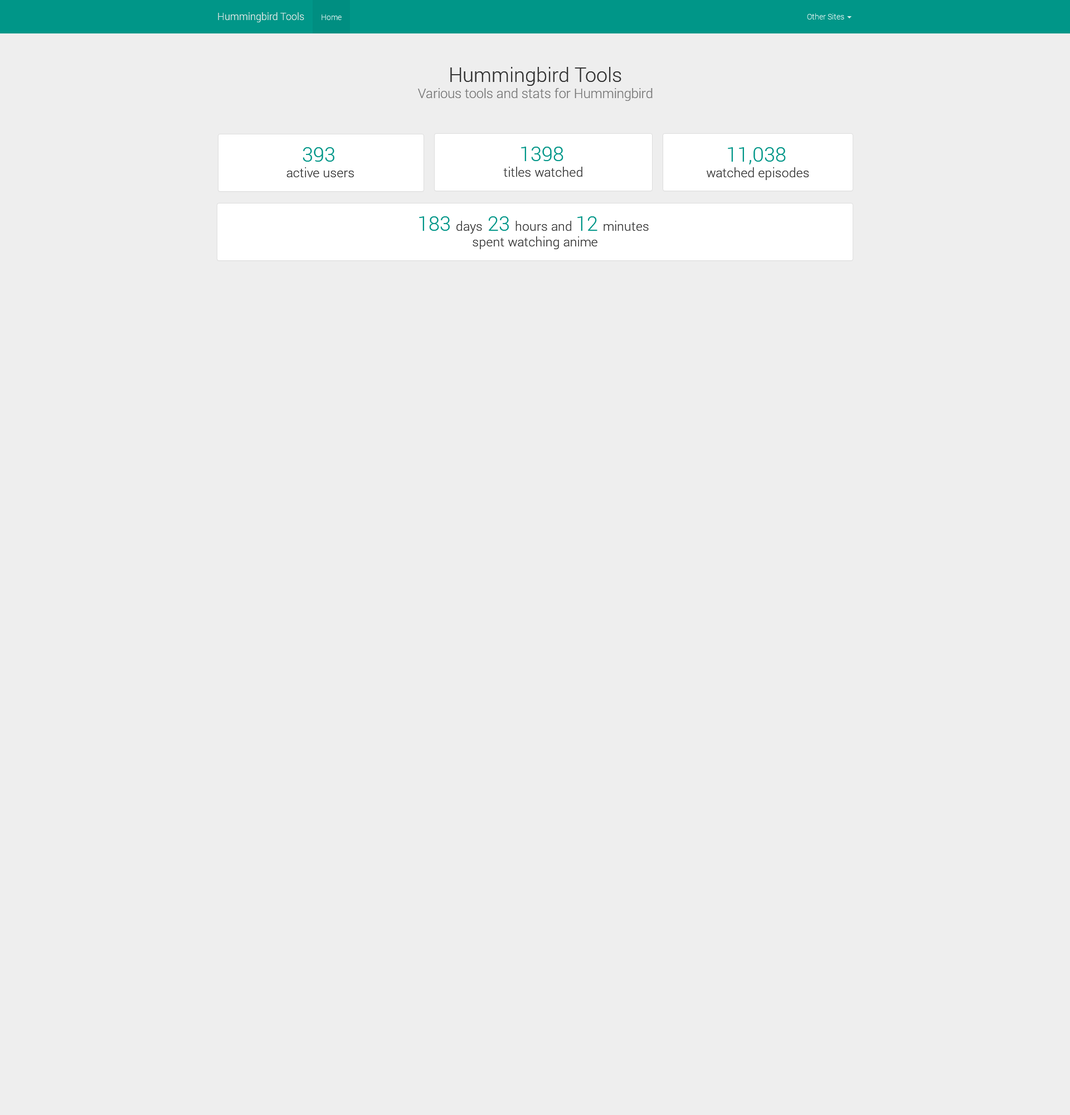
<style>
.page{position:relative;width:1070px;height:1115px;background:#eeeeee}
.page>*{position:absolute;margin:0}
.t1{font:10px "Roboto-Light";color:#e4f0ee}
.t2{font:7.8px "Roboto-Light";color:#d6edeb}
.t3{font:7.8px "Roboto-Light";color:#d6eeec}
.t4{font:13.4px "Roboto-Light";color:#777777}
.t5{font:20.1px "Roboto-Light";color:#333333}
.t6{font:12.8px "Roboto-Light";color:#333333}
.t7{font:20.1px "Roboto-Light";color:#009688}
</style>
<div class="page">
<p class="t1" style="left:218px;top:12px;width:86px;height:10px">Hummingbird Tools</p>
<p class="t2" style="left:322px;top:14px;width:20px;height:6px">Home</p>
<p class="t3" style="left:807px;top:13px;width:37px;height:7px">Other Sites</p>
<p class="t4" style="left:418px;top:67px;width:235px;height:34px;text-align:center"><span class="t5">Hummingbird Tools<br></span>Various tools and stats for Hummingbird</p>
<p class="t6" style="left:286px;top:147px;width:68px;height:30px;text-align:center"><span class="t7">393</span> <br>active users</p>
<p class="t6" style="left:503px;top:147px;width:79px;height:30px;text-align:center"><span class="t7">1398</span> <br>titles watched</p>
<p class="t6" style="left:707px;top:147px;width:102px;height:33px;text-align:center"><span class="t7">11,038</span> <br>watched episodes</p>
<p class="t6" style="left:419px;top:216px;width:230px;height:33px;text-align:center"><span class="t7">183 </span>days <span class="t7">23 </span>hours and <span class="t7">12 </span>minutes <br>spent watching anime</p>
</div>
